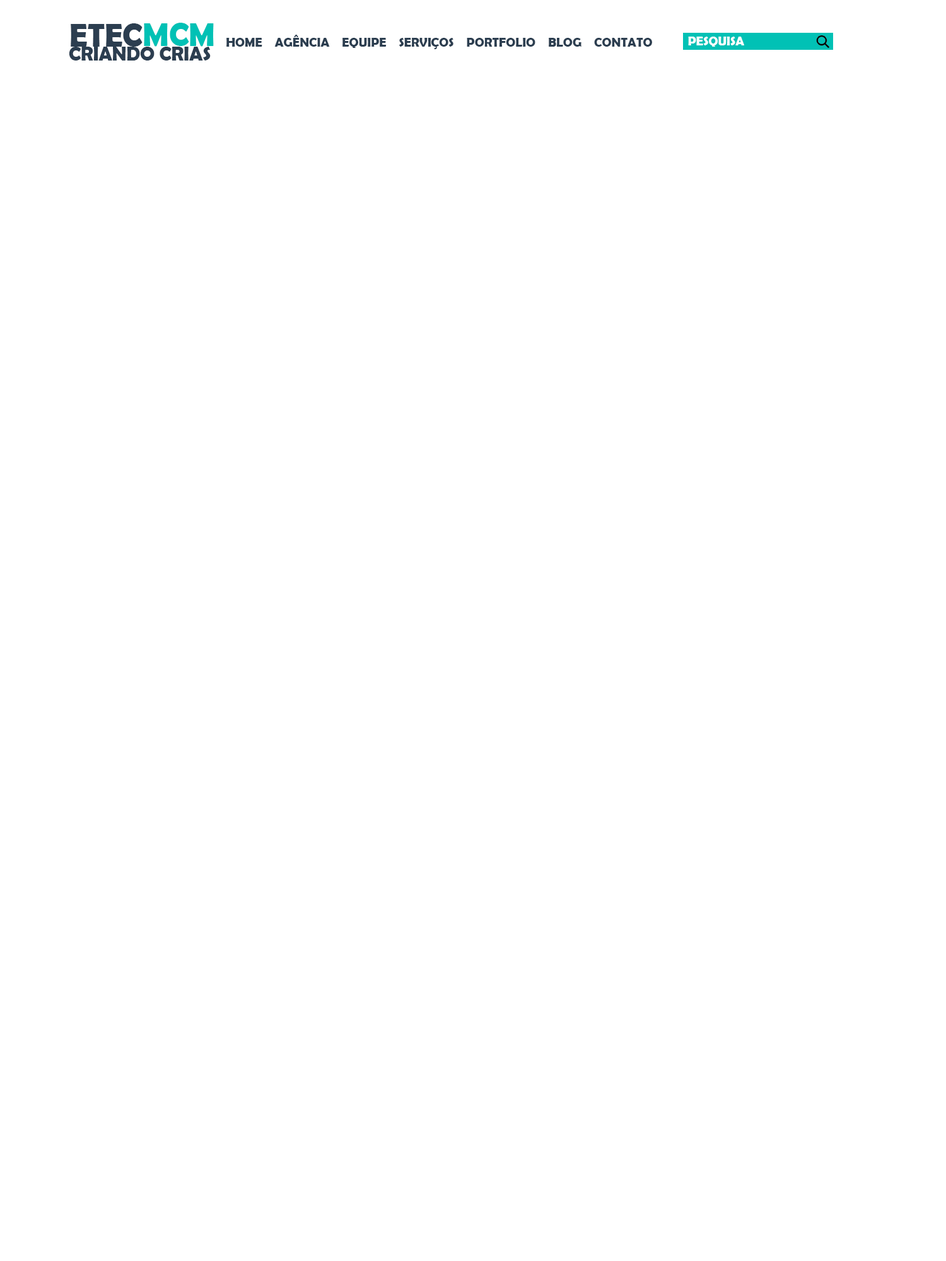
<style>
.page{position:relative;width:946px;height:1261px;background:#ffffff}
.page>*{position:absolute;margin:0}
.t1{font:33.2px "BerlinSansFBDemi-Bold";color:#2c3e50;scale:0.97 1}
.t2{font:33.2px "BerlinSansFBDemi-Bold";color:#01c1b5;scale:0.97 1}
.t3{font:12.6px "BerlinSansFBDemi-Bold";color:#2c3e50}
.t4{font:12.6px "BerlinSansFBDemi-Bold";color:#ffffff}
.t5{font:19.9px "BerlinSansFBDemi-Bold";color:#2c3e50;scale:0.97 1}
</style>
<div class="page">
<p class="t1" style="left:71px;top:23px;width:71px;height:24px">ETEC</p>
<p class="t2" style="left:144px;top:23px;width:70px;height:24px">MCM</p>
<p class="t3" style="left:226px;top:35px;width:426px;height:14px">HOME    AGÊNCIA    EQUIPE    SERVIÇOS    PORTFOLIO    BLOG    CONTATO</p>
<p class="t4" style="left:688px;top:37px;width:56px;height:10px">PESQUISA</p>
<p class="t5" style="left:69px;top:47px;width:142px;height:14px">CRIANDO CRIAS</p>
</div>
